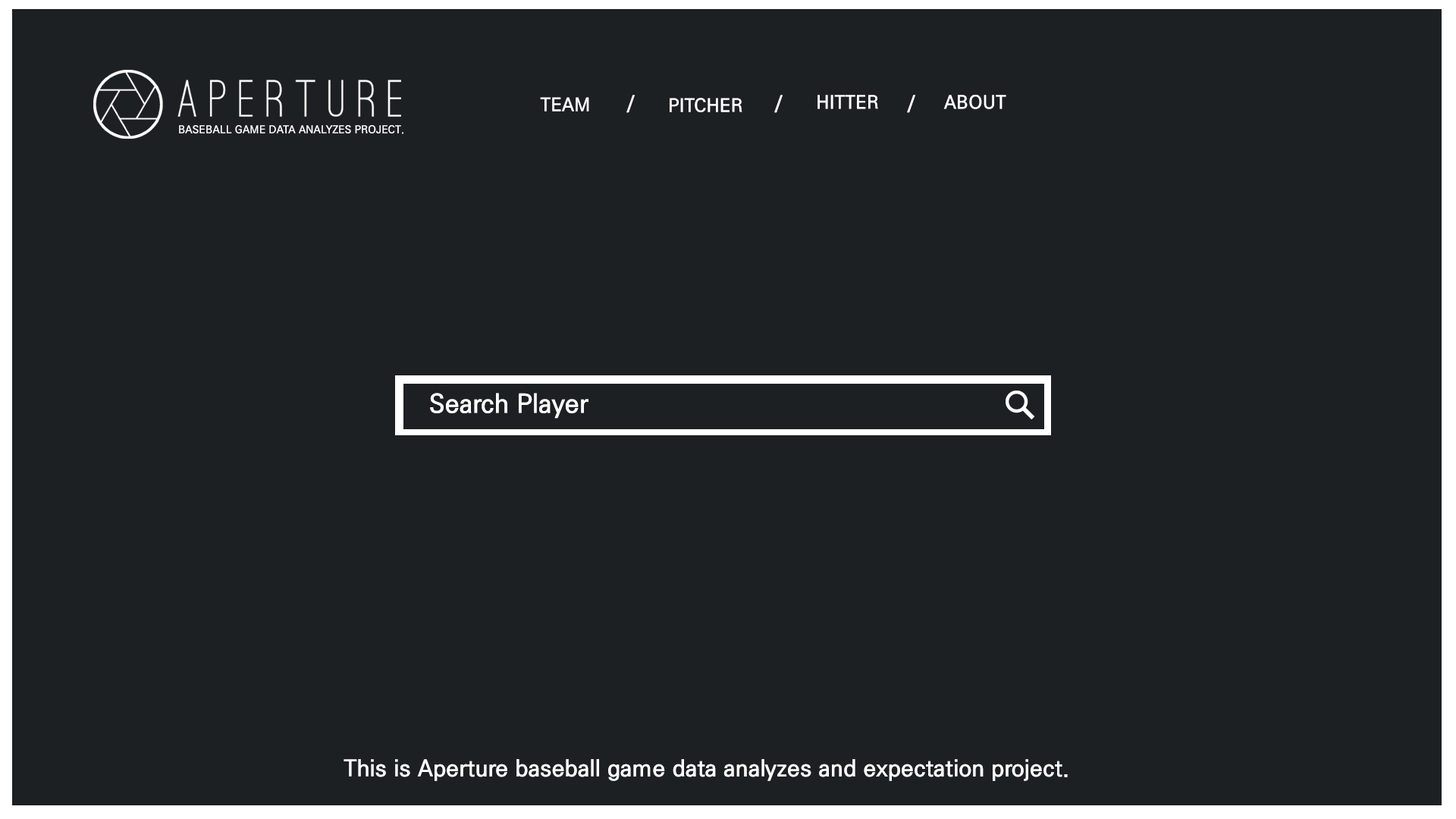
<style>
.page{position:relative;width:1456px;height:819px;background:#1d2023}
.page>*{position:absolute;margin:0}
.t1{font:18.2px "KoPubDotumPB";letter-spacing:0.01em;color:#ffffff}
.t2{font:10.6px "KoPubDotumPB";letter-spacing:0.01em;color:#ffffff}
.t3{font:25.7px "KoPubDotumPB";letter-spacing:0.01em;color:#ffffff}
.t4{font:22.7px "KoPubDotumPB";letter-spacing:0.01em;color:#ffffff}
</style>
<div class="page">
<p class="t1" style="left:540px;top:97px;width:49px;height:14px">TEAM</p>
<p class="t1" style="left:626px;top:95px;width:9px;height:18px">/</p>
<p class="t1" style="left:670px;top:98px;width:72px;height:14px">PITCHER</p>
<p class="t1" style="left:774px;top:95px;width:9px;height:18px">/</p>
<p class="t1" style="left:817px;top:95px;width:61px;height:14px">HITTER</p>
<p class="t1" style="left:907px;top:95px;width:8px;height:18px">/</p>
<p class="t1" style="left:943px;top:95px;width:63px;height:14px">ABOUT</p>
<p class="t2" style="left:179px;top:125px;width:224px;height:9px">BASEBALL GAME DATA ANALYZES PROJECT.</p>
<p class="t3" style="left:430px;top:393px;width:158px;height:26px">Search Player</p>
<p class="t4" style="left:344px;top:759px;width:724px;height:22px">This is Aperture baseball game data analyzes and expectation project.</p>
</div>
